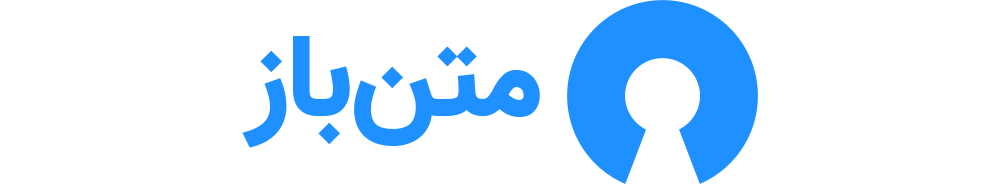
<style>
.page{position:relative;width:1000px;height:184px;background:#ffffff}
.page>*{position:absolute;margin:0}
.t1{font:116.7px "Vazir-Black";color:#1e90ff}
</style>
<div class="page">
<p class="t1" style="left:242px;top:36px;width:298px;height:112px">متن‌باز</p>
</div>
